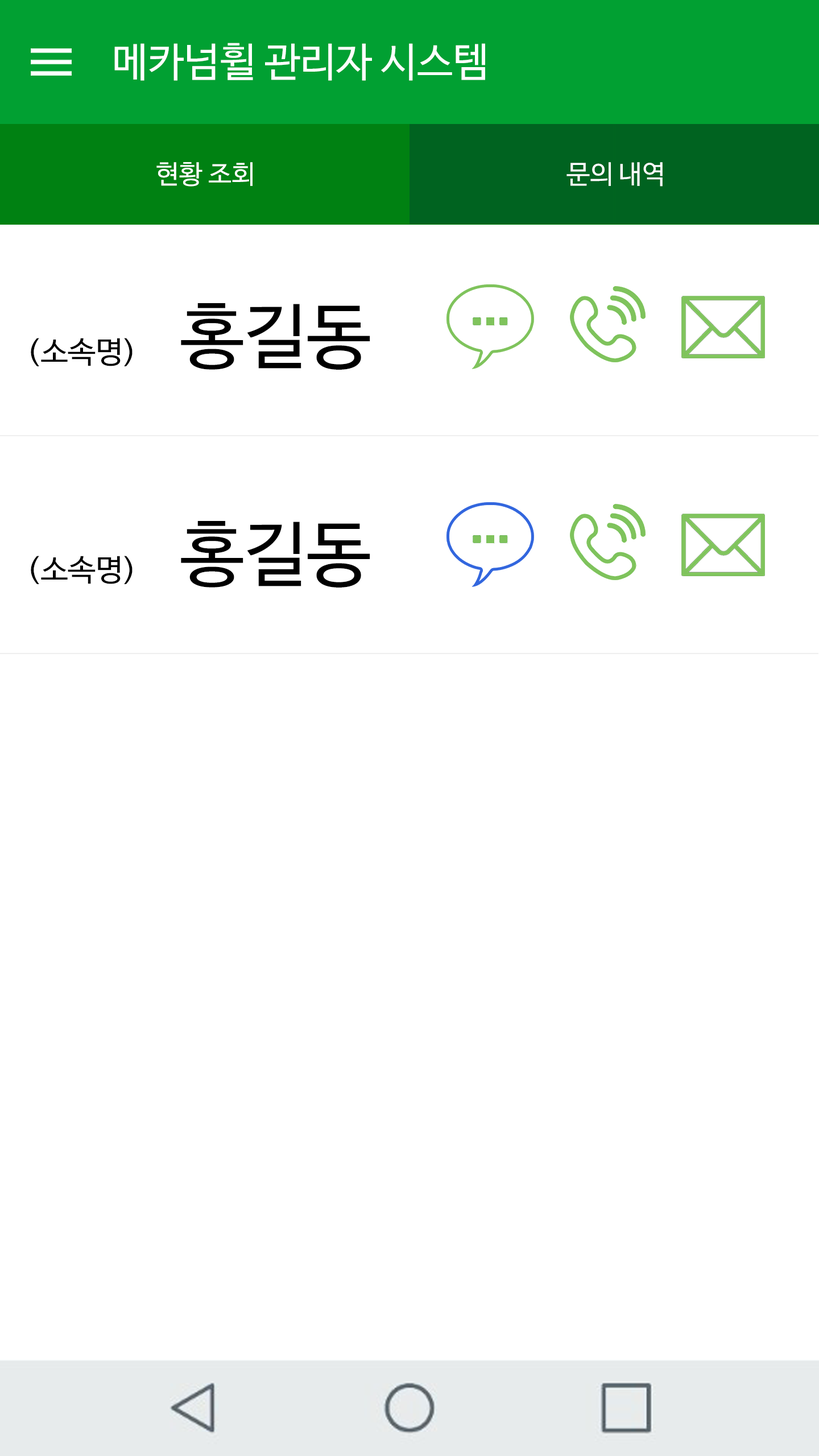
<style>
.page{position:relative;width:819px;height:1456px;background:#ffffff}
.page>*{position:absolute;margin:0}
.t1{font:40.3px "NanumBarunGothicOTF";color:#ffffff}
.t2{font:26.1px "NanumBarunGothicOTF";color:#ffffff}
.t3{font:71.1px "NanumBarunGothicOTF";color:#000000}
.t4{font:30.2px "NanumBarunGothicOTF";color:#000000;scale:1.03 1}
</style>
<div class="page">
<p class="t1" style="left:114px;top:43px;width:371px;height:38px">메카넘휠 관리자 시스템</p>
<p class="t2" style="left:156px;top:162px;width:97px;height:25px">현황 조회</p>
<p class="t2" style="left:566px;top:162px;width:97px;height:25px">문의 내역</p>
<p class="t3" style="left:181px;top:303px;width:189px;height:67px">홍길동</p>
<p class="t4" style="left:31px;top:338px;width:102px;height:28px">(소속명)</p>
<p class="t3" style="left:181px;top:521px;width:189px;height:67px">홍길동</p>
<p class="t4" style="left:31px;top:556px;width:102px;height:28px">(소속명)</p>
</div>
